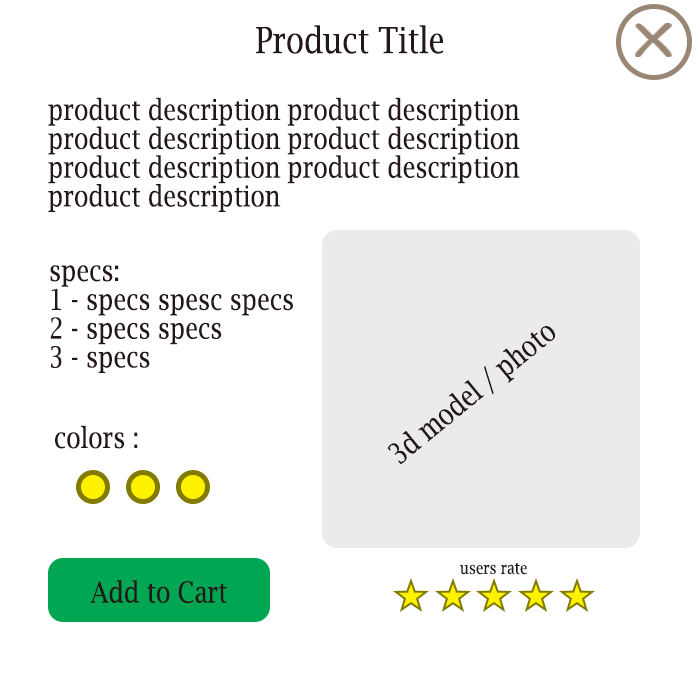
<style>
.page{position:relative;width:700px;height:700px;background:#ffffff}
.page>*{position:absolute;margin:0}
.t1{font:36px "LucidaBright";color:#231719;scale:0.83 1}
.t2{font:28.8px "LucidaBright";color:#231719;scale:0.83 1}
.t3{font:16.8px "LucidaBright";color:#231719;scale:0.83 1}
</style>
<div class="page">
<p class="t1" style="left:256px;top:25px;width:187px;height:29px">Product Title</p>
<p class="t2" style="left:48px;top:97px;width:472px;height:115px">product description product description<br>product description product description<br>product description product description<br>product description</p>
<p class="t2" style="left:50px;top:265px;width:243px;height:108px">specs:<br>1 - specs spesc specs<br>2 - specs specs<br>3 - specs</p>
<p class="t2" style="left:387px;top:326px;width:168px;height:138px;rotate:-39deg">3d model / photo</p>
<p class="t2" style="left:55px;top:425px;width:83px;height:24px">colors :</p>
<p class="t3" style="left:460px;top:563px;width:67px;height:12px">users rate</p>
<p class="t2" style="left:90px;top:580px;width:137px;height:24px">Add to Cart</p>
</div>
